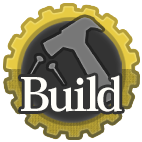
<style>
.page{position:relative;width:142px;height:142px;background:#ffffff}
.page>*{position:absolute;margin:0}
.t1{font:48px "HeiseiMinStd-W7";letter-spacing:-0.04em;color:#fffef9}
</style>
<div class="page">
<p class="t1" style="left:21px;top:75px;width:101px;height:37px">Build</p>
</div>
